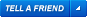
<style>
.page{position:relative;width:87px;height:17px}
.page>*{position:absolute;margin:0}
.t1{font:9px "FranklinGothic-DemiItalic";color:#ffffff;text-transform:uppercase}
</style>
<div class="page">
<p class="t1" style="left:5px;top:5px;width:59px;height:7px">TELL A FRIEND</p>
</div>
